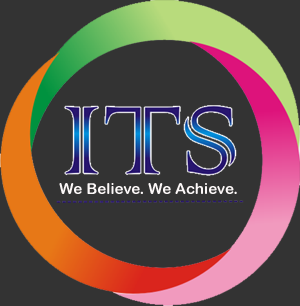
<style>
.page{position:relative;width:300px;height:306px;background:#333333}
.page>*{position:absolute;margin:0}
.t1{font:15.3px "ArialRoundedMTBold";color:#fbf7f7}
</style>
<div class="page">
<p class="t1" style="left:59px;top:183px;width:178px;height:11px">We Believe. We Achieve.</p>
</div>
